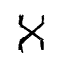
<style>
.page{position:relative;width:65px;height:65px;background:#ffffff}
.page>*{position:absolute;margin:0}
.t1{font:72px "PencilGrid";color:#000000}
</style>
<div class="page">
<p class="t1" style="left:18px;top:14px;width:27px;height:39px">x</p>
</div>
